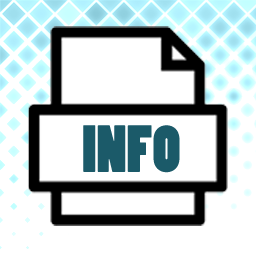
<style>
.page{position:relative;width:256px;height:256px;background:#ffffff}
.page>*{position:absolute;margin:0}
.t1{font:62.4px "PoplarStd";color:#1b5a69}
</style>
<div class="page">
<p class="t1" style="left:83px;top:125px;width:97px;height:48px">INFO</p>
</div>
